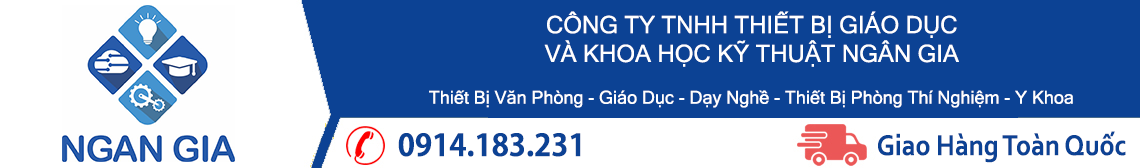
<style>
.page{position:relative;width:1140px;height:168px;background:#0c4294}
.page>*{position:absolute;margin:0}
.t1{font:24px "MicrosoftSansSerif";color:#ffffff}
.t2{font:18px "MicrosoftSansSerif";color:#ffffff}
.t3{font:30px "AdobeGothicStd-Bold";color:#0c4294}
.t4{font:30px "Corbel-Bold";color:#0c4294;scale:0.9 1}
</style>
<div class="page">
<p class="t1" style="left:544px;top:11px;width:415px;height:56px;text-align:center">CÔNG TY TNHH THIẾT BỊ GIÁO DỤC<br>VÀ KHOA HỌC KỸ THUẬT NGÂN GIA</p>
<p class="t2" style="left:429px;top:90px;width:644px;height:18px">Thiết Bị Văn Phòng - Giáo Dục - Dạy Nghề - Thiết Bị Phòng Thí Nghiệm - Y Khoa</p>
<p class="t3" style="left:398px;top:133px;width:183px;height:24px">0914.183.231</p>
<p class="t4" style="left:878px;top:131px;width:248px;height:32px">Giao Hàng Toàn Quốc</p>
</div>
